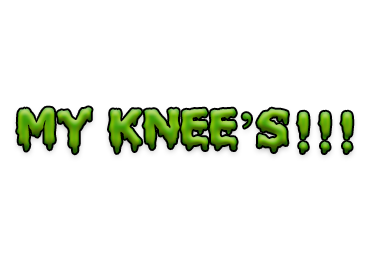
<style>
.page{position:relative;width:370px;height:270px;background:#ffffff}
.page>*{position:absolute;margin:0}
.t1{font:55px "Liquidismpart2"}
.t2{font:55px "TimesNewRomanPSMT"}
</style>
<div class="page">
<p class="t1" style="left:17px;top:107px;width:336px;height:47px">!!!MY KNEE<span class="t2">’</span>S</p>
</div>
